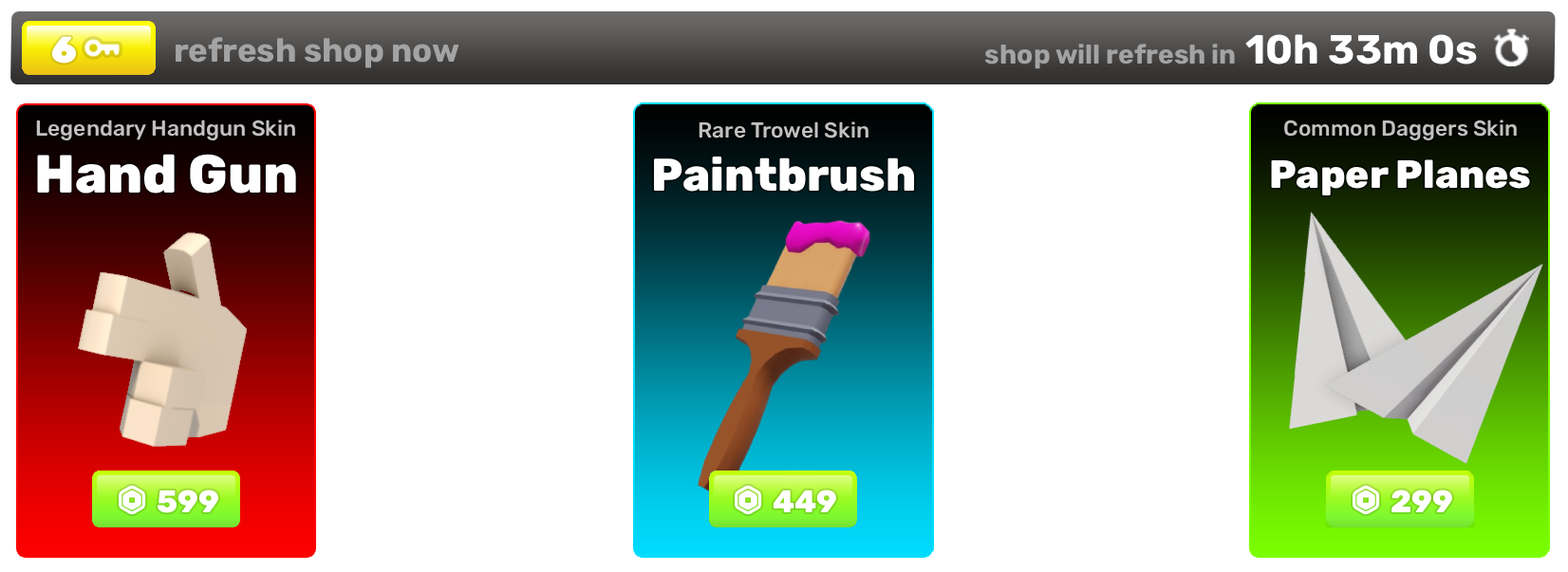
<style>
.page{position:relative;width:1568px;height:572px;background:#ffffff}
.page>*{position:absolute;margin:0}
.t1{font:33px "Rubik-Bold";color:#a4a3a3}
.t2{font:40.6px "Rubik-Bold";color:#ffffff}
.t3{font:26.7px "Rubik-Bold";color:#a4a3a3}
.t4{font:21.7px "Rubik-Medium";color:#c2c0c0}
.t5{font:21.6px "Rubik-Medium";color:#c2c0c0}
.t6{font:53.7px "Rubik-ExtraBold";color:#ffffff}
.t7{font:45.9px "Rubik-ExtraBold";color:#ffffff}
.t8{font:39.4px "Rubik-ExtraBold";color:#ffffff}
</style>
<div class="page">
<p class="t1" style="left:176px;top:37px;width:283px;height:31px">refresh shop now</p>
<p class="t2" style="left:1245px;top:34px;width:232px;height:31px">10h 33m 0s</p>
<p class="t3" style="left:984px;top:44px;width:251px;height:25px">shop will refresh in</p>
<p class="t4" style="left:36px;top:120px;width:259px;height:20px">Legendary Handgun Skin</p>
<p class="t4" style="left:699px;top:121px;width:169px;height:18px">Rare Trowel Skin</p>
<p class="t5" style="left:1284px;top:120px;width:233px;height:20px">Common Daggers Skin</p>
<p class="t6" style="left:37px;top:154px;width:259px;height:40px">Hand Gun</p>
<p class="t7" style="left:653px;top:157px;width:262px;height:35px">Paintbrush</p>
<p class="t8" style="left:1271px;top:159px;width:259px;height:37px">Paper Planes</p>
</div>
